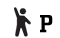
<style>
.page{position:relative;width:60px;height:38px;background:#ffffff}
.page>*{position:absolute;margin:0}
.t1{font:24px "CenterCity-Bold";letter-spacing:0.01em;color:#000000;font-weight:bold}
</style>
<div class="page">
<p class="t1" style="left:40px;top:15px;width:13px;height:18px">P</p>
</div>
